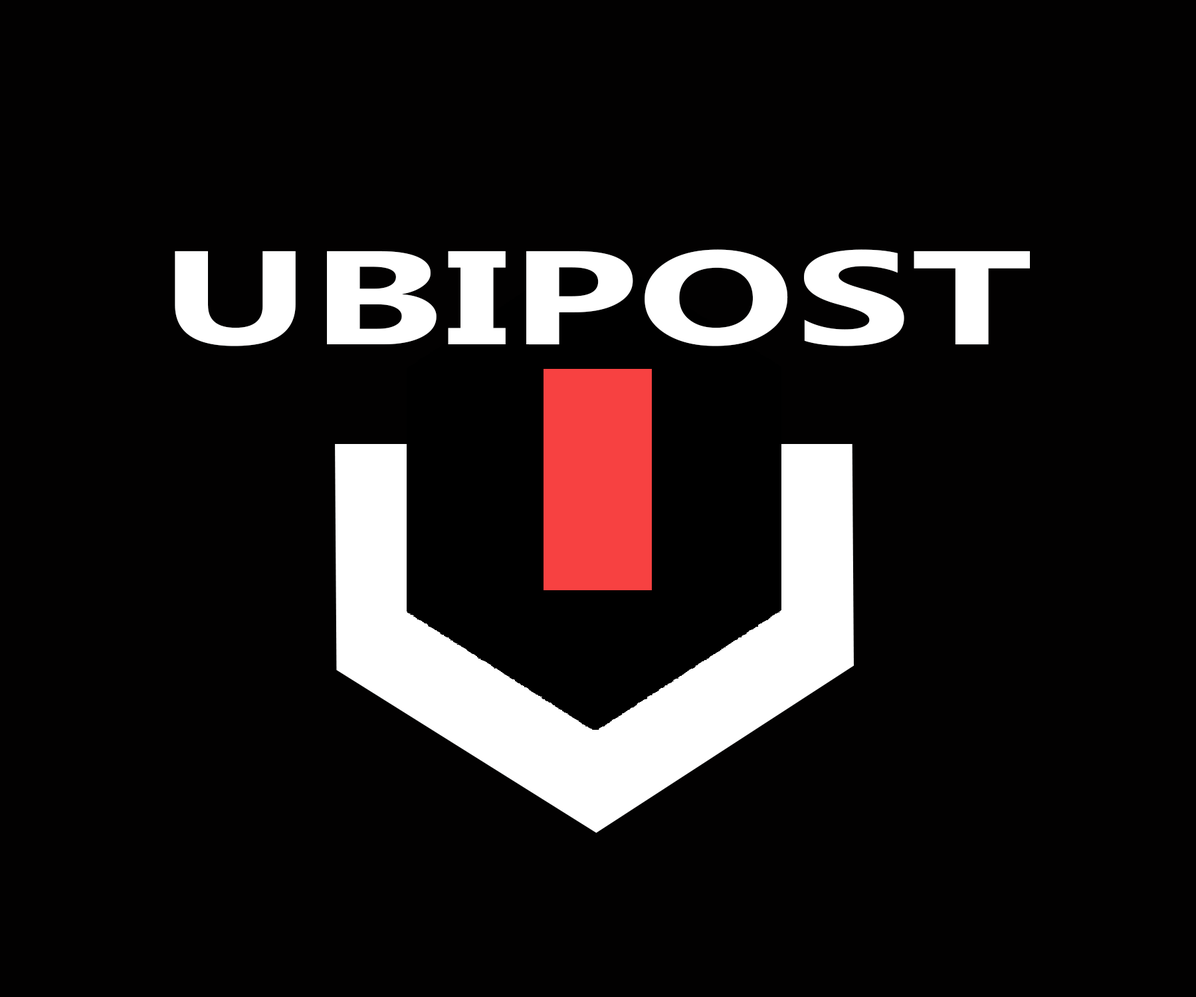
<style>
.page{position:relative;width:1196px;height:997px;background:#020101}
.page>*{position:absolute;margin:0}
.t1{font:132.9px "MicrosoftPhagsPa-Bold";color:#ffffff;scale:1.56 1}
</style>
<div class="page">
<p class="t1" style="left:175px;top:249px;width:855px;height:97px">UBIPOST</p>
</div>
